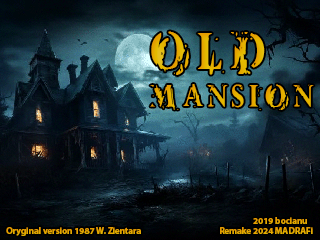
<style>
.page{position:relative;width:320px;height:240px}
.page>*{position:absolute;margin:0}
.t1{font:36px/36px "VtksDemolition";letter-spacing:0.1em;color:#e4b000}
.t2{font:60px/36px "VtksDemolition";letter-spacing:0.1em;color:#e4b000}
.t3{font:9px "MyriadPro-Bold";color:#e4a200}
.t4{font:9px "MyriadPro-Bold";color:#e4a300}
.t5{font:9px "MyriadPro-Bold";color:#e4a500}
</style>
<div class="page">
<p class="t1" style="left:150px;top:31px;width:164px;height:79px"><span class="t2">OLD<br></span>MANSION</p>
<p class="t3" style="left:253px;top:217px;width:54px;height:7px">2019 bocianu</p>
<p class="t4" style="left:6px;top:227px;width:135px;height:9px">Oryginal version 1987 W. Zientara</p>
<p class="t5" style="left:220px;top:227px;width:93px;height:7px">Remake 2024 MADRAFi</p>
</div>
